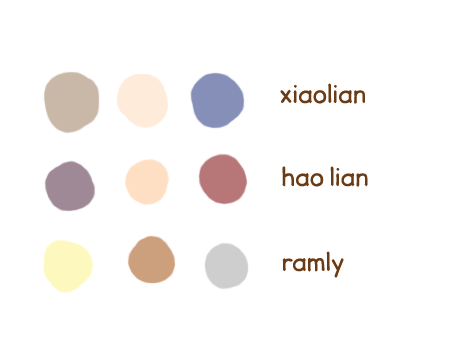
<style>
.page{position:relative;width:454px;height:340px;background:#ffffff}
.page>*{position:absolute;margin:0}
.t1{font:24px "JollyGoodSans-Basic";color:#6a3b14}
</style>
<div class="page">
<p class="t1" style="left:280px;top:83px;width:85px;height:21px">xiaolian</p>
<p class="t1" style="left:282px;top:166px;width:86px;height:21px">hao lian</p>
<p class="t1" style="left:282px;top:251px;width:62px;height:27px">ramly</p>
</div>
